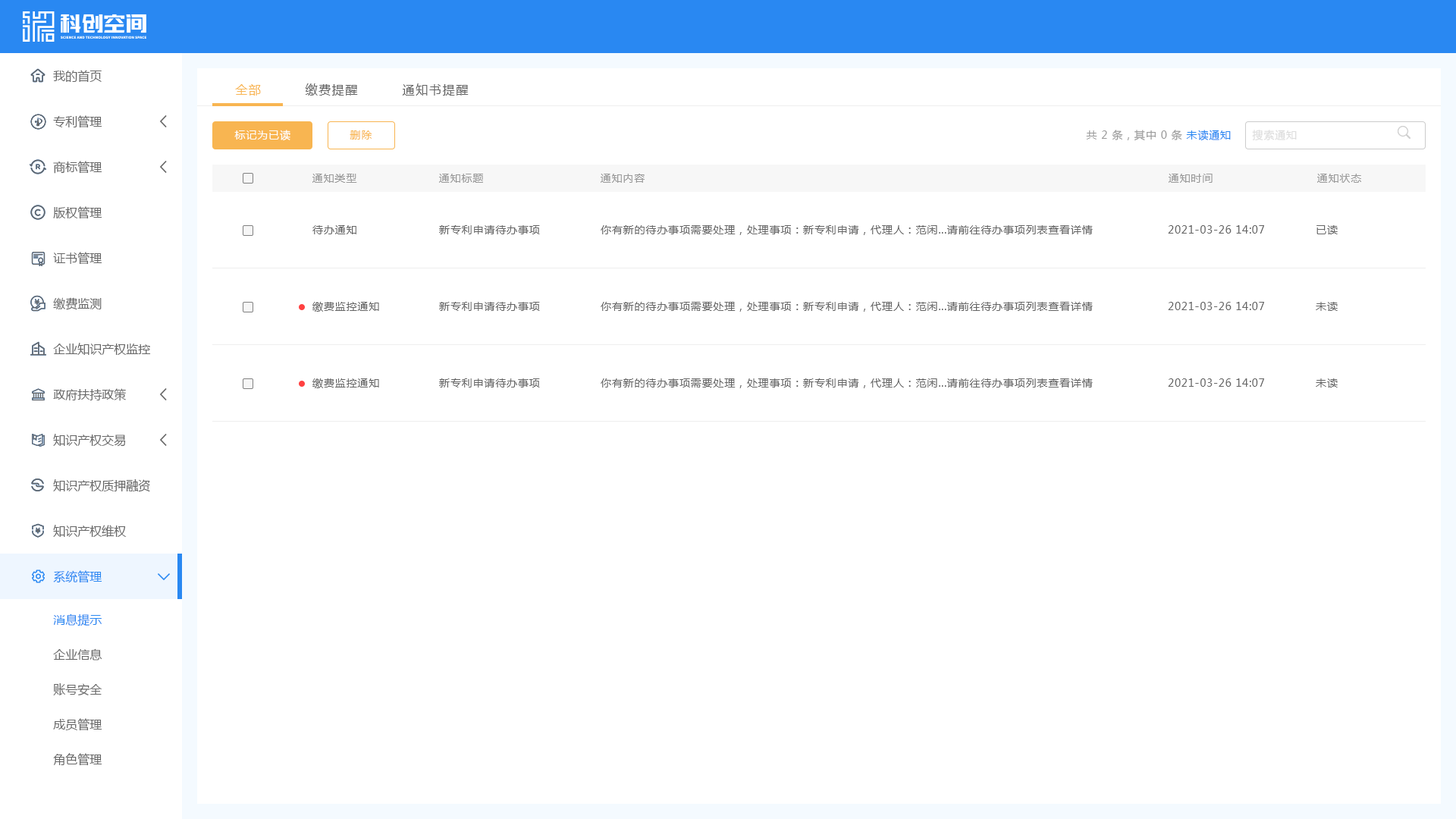
<style>
.page{position:relative;width:1456px;height:819px;background:#ffffff}
.page>*{position:absolute;margin:0}
.t1{font:12.1px "MicrosoftYaHei";color:#666666}
.t2{font:12.1px "MicrosoftYaHei";letter-spacing:0.1em;color:#f8b551}
.t3{font:12.1px "MicrosoftYaHei";letter-spacing:0.1em;color:#666666}
.t4{font:10.6px "MicrosoftYaHei";letter-spacing:0.06em;color:#ffffff}
.t5{font:10.6px "MicrosoftYaHei";letter-spacing:0.06em;color:#f8b551}
.t6{font:10.6px "MicrosoftYaHei";letter-spacing:0.06em;color:#999999}
.t7{font:10.6px "MicrosoftYaHei";letter-spacing:0.06em;color:#2988f2}
.t8{font:10.6px "MicrosoftYaHei";letter-spacing:0.06em;color:#dddddd}
.t9{font:10.6px "MicrosoftYaHei";letter-spacing:0.06em;color:#666666}
.t10{font:12.1px "MicrosoftYaHei";color:#2988f2}
</style>
<div class="page">
<p class="t1" style="left:53px;top:70px;width:49px;height:13px">我的首页</p>
<p class="t2" style="left:235px;top:84px;width:26px;height:12px">全部</p>
<p class="t3" style="left:306px;top:83px;width:52px;height:13px">缴费提醒</p>
<p class="t3" style="left:403px;top:83px;width:66px;height:13px">通知书提醒</p>
<p class="t1" style="left:53px;top:115px;width:49px;height:13px">专利管理</p>
<p class="t4" style="left:234px;top:130px;width:56px;height:11px">标记为已读</p>
<p class="t5" style="left:350px;top:130px;width:22px;height:10px">删除</p>
<p class="t6" style="left:1086px;top:130px;width:145px;height:11px">共 2 条，其中 0 条 <span class="t7">未读通知</span></p>
<p class="t8" style="left:1252px;top:130px;width:45px;height:11px">搜索通知</p>
<p class="t1" style="left:53px;top:161px;width:49px;height:13px">商标管理</p>
<p class="t6" style="left:312px;top:174px;width:45px;height:9px">通知类型</p>
<p class="t6" style="left:439px;top:174px;width:44px;height:9px">通知标题</p>
<p class="t6" style="left:601px;top:174px;width:44px;height:9px">通知内容</p>
<p class="t6" style="left:1169px;top:174px;width:44px;height:9px">通知时间</p>
<p class="t6" style="left:1317px;top:174px;width:44px;height:9px">通知状态</p>
<p class="t1" style="left:53px;top:206px;width:49px;height:13px">版权管理</p>
<p class="t9" style="left:312px;top:225px;width:44px;height:9px">待办通知</p>
<p class="t9" style="left:439px;top:225px;width:101px;height:9px">新专利申请待办事项</p>
<p class="t9" style="left:601px;top:225px;width:492px;height:10px">你有新的待办事项需要处理，处理事项：新专利申请，代理人：范闲...请前往待办事项列表查看详情</p>
<p class="t9" style="left:1168px;top:225px;width:96px;height:9px">2021-03-26 14:07</p>
<p class="t9" style="left:1316px;top:225px;width:22px;height:9px">已读</p>
<p class="t1" style="left:53px;top:252px;width:49px;height:13px">证书管理</p>
<p class="t1" style="left:53px;top:297px;width:49px;height:13px">缴费监测</p>
<p class="t9" style="left:312px;top:302px;width:67px;height:10px">缴费监控通知</p>
<p class="t9" style="left:439px;top:302px;width:101px;height:9px">新专利申请待办事项</p>
<p class="t9" style="left:601px;top:302px;width:492px;height:10px">你有新的待办事项需要处理，处理事项：新专利申请，代理人：范闲...请前往待办事项列表查看详情</p>
<p class="t9" style="left:1168px;top:302px;width:96px;height:8px">2021-03-26 14:07</p>
<p class="t9" style="left:1316px;top:302px;width:22px;height:9px">未读</p>
<p class="t1" style="left:53px;top:343px;width:98px;height:12px">企业知识产权监控</p>
<p class="t1" style="left:53px;top:388px;width:73px;height:13px">政府扶持政策</p>
<p class="t9" style="left:312px;top:378px;width:67px;height:10px">缴费监控通知</p>
<p class="t9" style="left:439px;top:378px;width:101px;height:10px">新专利申请待办事项</p>
<p class="t9" style="left:601px;top:378px;width:492px;height:10px">你有新的待办事项需要处理，处理事项：新专利申请，代理人：范闲...请前往待办事项列表查看详情</p>
<p class="t9" style="left:1168px;top:378px;width:96px;height:9px">2021-03-26 14:07</p>
<p class="t9" style="left:1316px;top:378px;width:22px;height:10px">未读</p>
<p class="t1" style="left:53px;top:434px;width:73px;height:13px">知识产权交易</p>
<p class="t1" style="left:53px;top:479px;width:97px;height:13px">知识产权质押融资</p>
<p class="t1" style="left:53px;top:525px;width:74px;height:13px">知识产权维权</p>
<p class="t10" style="left:53px;top:570px;width:49px;height:13px">系统管理</p>
<p class="t10" style="left:53px;top:613px;width:49px;height:13px">消息提示</p>
<p class="t1" style="left:53px;top:648px;width:49px;height:12px">企业信息</p>
<p class="t1" style="left:53px;top:683px;width:49px;height:12px">账号安全</p>
<p class="t1" style="left:53px;top:718px;width:49px;height:13px">成员管理</p>
<p class="t1" style="left:53px;top:753px;width:49px;height:13px">角色管理</p>
</div>
